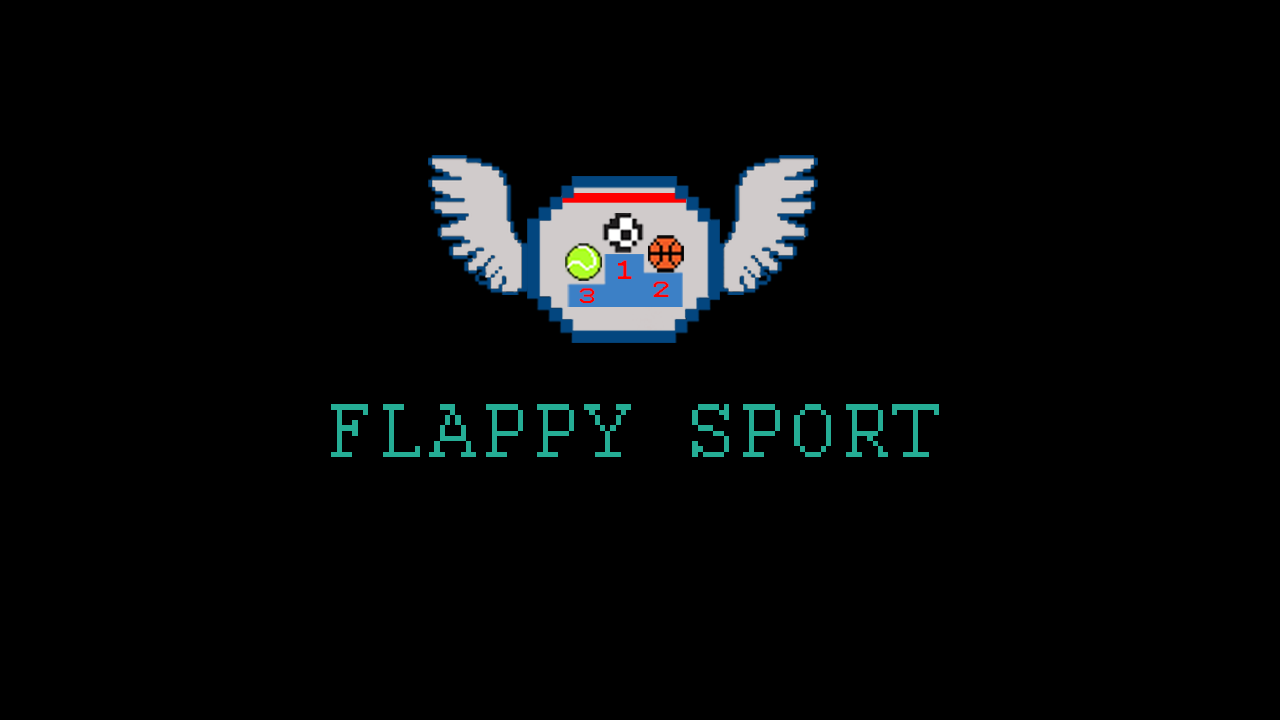
<style>
.page{position:relative;width:1280px;height:720px;background:#000000}
.page>*{position:absolute;margin:0}
.t1{font:21.2px "Terminal";letter-spacing:0.001em;color:#ff0000;font-variant:small-caps;scale:1.27 1}
.t2{font:17.7px "Terminal";letter-spacing:0.001em;color:#ff0000;font-variant:small-caps;scale:1.24 1}
.t3{font:16.8px "Terminal";letter-spacing:0.001em;color:#ff0000;font-variant:small-caps;scale:1.27 1}
.t4{font:84px "Courier";letter-spacing:0.05em;color:#25ad95;font-variant:small-caps}
</style>
<div class="page">
<p class="t1" style="left:618px;top:260px;width:14px;height:19px">1</p>
<p class="t2" style="left:653px;top:281px;width:16px;height:16px">2</p>
<p class="t3" style="left:579px;top:288px;width:16px;height:15px">3</p>
<p class="t4" style="left:331px;top:404px;width:608px;height:53px">FLAPPY SPORT</p>
</div>
